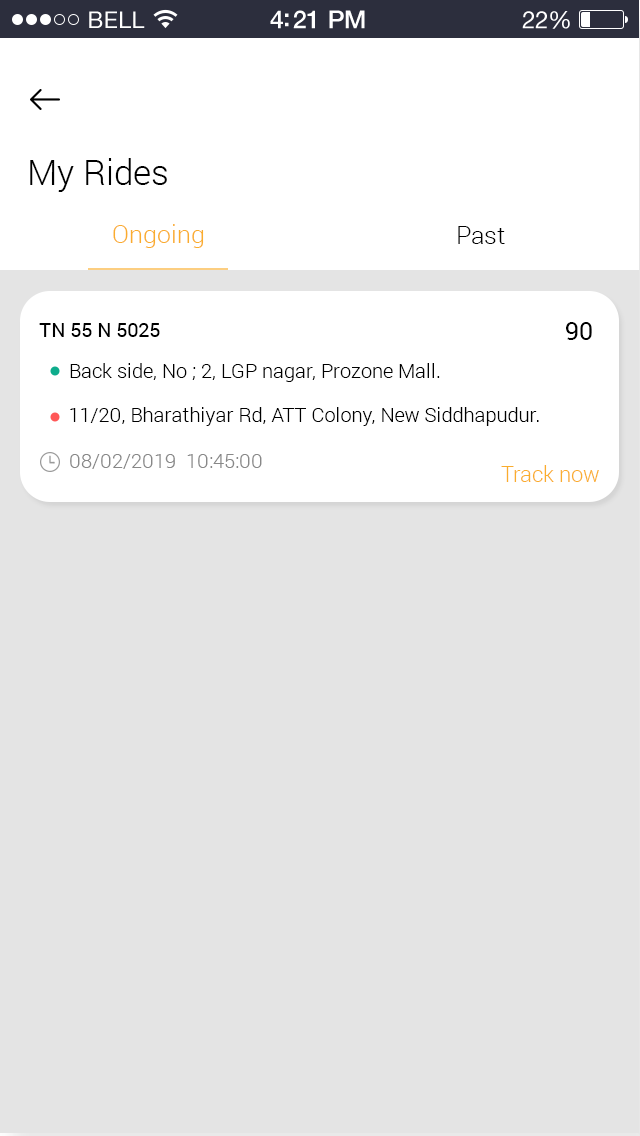
<style>
.page{position:relative;width:640px;height:1136px;background:#e4e4e4}
.page>*{position:absolute;margin:0}
.t1{font:35px "Roboto-Light";color:#000000}
.t2{font:25px "Roboto-Light";color:#faad2d}
.t3{font:25px "Roboto-Light";color:#000000}
.t4{font:20px "Roboto-Regular";color:#000000}
.t5{font:25px "Roboto-Regular";color:#000000}
.t6{font:20px "Roboto-Light";color:#000000}
.t7{font:20px "Roboto-Light";color:#888888}
.t8{font:22px "Roboto-Light";color:#faad2d}
</style>
<div class="page">
<p class="t1" style="left:30px;top:158px;width:137px;height:34px">My Rides</p>
<p class="t2" style="left:113px;top:224px;width:91px;height:24px">Ongoing</p>
<p class="t3" style="left:458px;top:226px;width:47px;height:18px">Past</p>
<p class="t4" style="left:39px;top:323px;width:121px;height:14px">TN 55 N 5025</p>
<p class="t5" style="left:566px;top:322px;width:26px;height:18px">₹ 90</p>
<p class="t6" style="left:70px;top:363px;width:370px;height:19px">Back side, No ; 2, LGP nagar, Prozone Mall.</p>
<p class="t6" style="left:70px;top:407px;width:469px;height:19px">11/20, Bharathiyar Rd, ATT Colony, New Siddhapudur.</p>
<p class="t7" style="left:70px;top:454px;width:192px;height:15px">08/02/2019  10:45:00</p>
<p class="t8" style="left:501px;top:465px;width:98px;height:17px">Track now</p>
</div>
